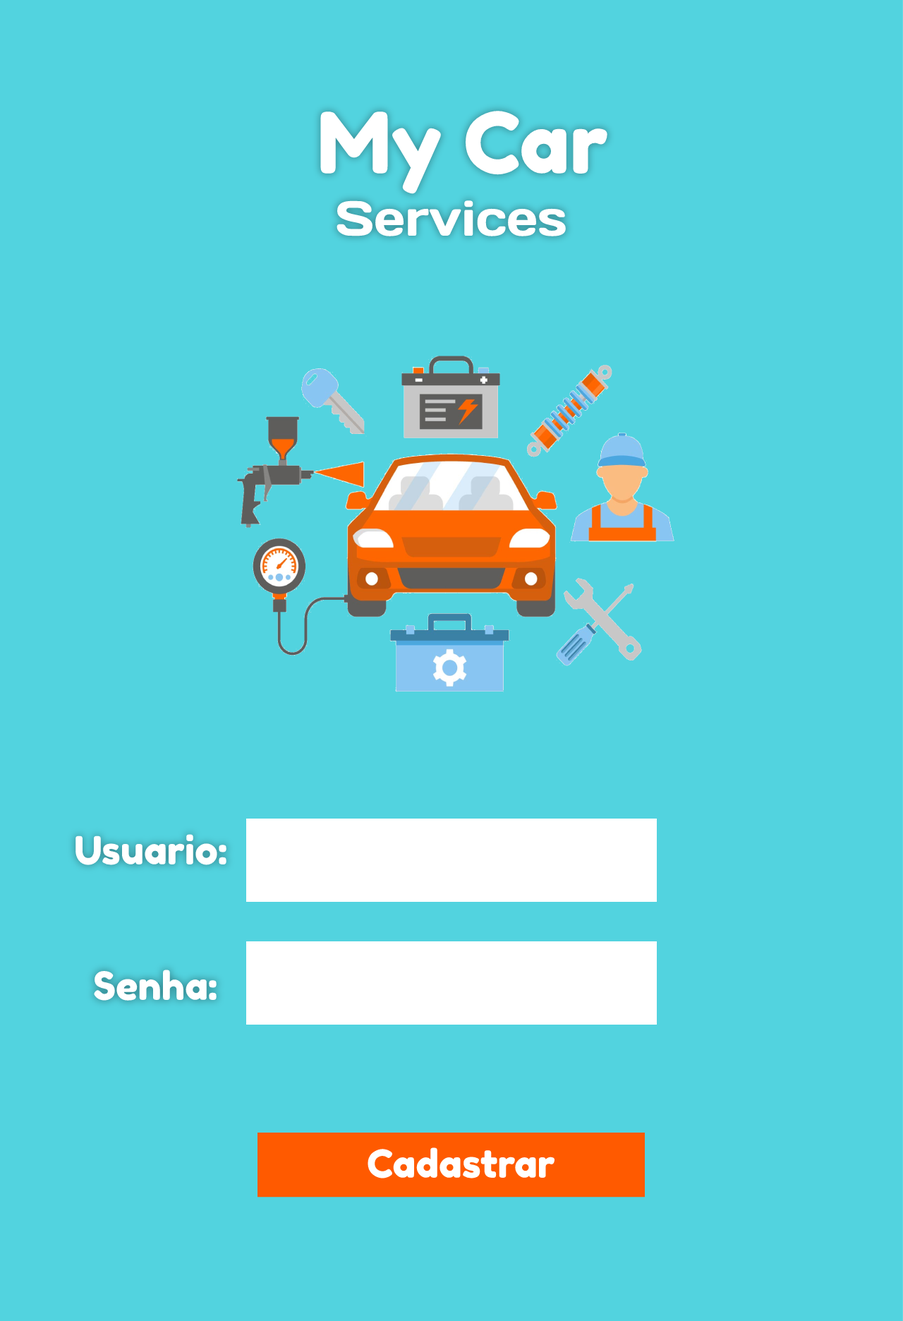
<style>
.page{position:relative;width:903px;height:1321px;background:#52d3df}
.page>*{position:absolute;margin:0}
.t1{font:84.7px "FredokaOne-Regular";color:#ffffff}
.t2{font:49.4px "DaysOne-Regular";color:#ffffff}
.t3{font:38.8px "FredokaOne-Regular";color:#ffffff}
</style>
<div class="page">
<p class="t1" style="left:320px;top:111px;width:287px;height:83px">My Car</p>
<p class="t2" style="left:336px;top:200px;width:230px;height:36px">Services</p>
<p class="t3" style="left:75px;top:834px;width:151px;height:31px">Usuario:</p>
<p class="t3" style="left:94px;top:969px;width:123px;height:31px">Senha:</p>
<p class="t3" style="left:368px;top:1147px;width:187px;height:31px">Cadastrar</p>
</div>
